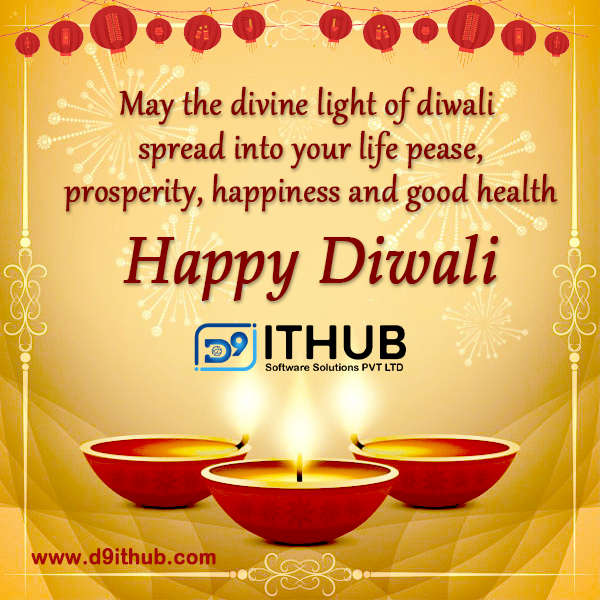
<style>
.page{position:relative;width:600px;height:600px}
.page>*{position:absolute;margin:0}
.t1{font:41.4px/43.3px "Gabriola";color:#820000;font-weight:bold;scale:0.93 1}
.t2{font:66.2px "PalatinoLinotype-Italic";color:#820000;font-weight:bold;scale:0.93 1}
.t3{font:21.5px "ArialRoundedMTBold";color:#a60808;font-weight:bold;scale:0.93 1}
</style>
<div class="page">
<p class="t1" style="left:63px;top:86px;width:495px;height:126px;text-align:center">May the divine light of diwali <br>spread into your life pease,<br>prosperity, happiness and good health</p>
<p class="t2" style="left:123px;top:234px;width:375px;height:67px">Happy Diwali</p>
<p class="t3" style="left:31px;top:548px;width:185px;height:17px">www.d9ithub.com</p>
</div>
